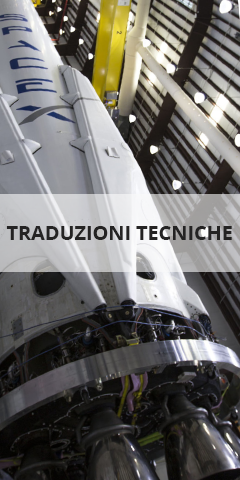
<style>
.page{position:relative;width:240px;height:480px}
.page>*{position:absolute;margin:0}
.t1{font:20px "OpenSans-Bold";letter-spacing:-0.005em;color:#242323;text-transform:uppercase}
</style>
<div class="page">
<p class="t1" style="left:6px;top:226px;width:226px;height:14px">Traduzioni Tecniche</p>
</div>
